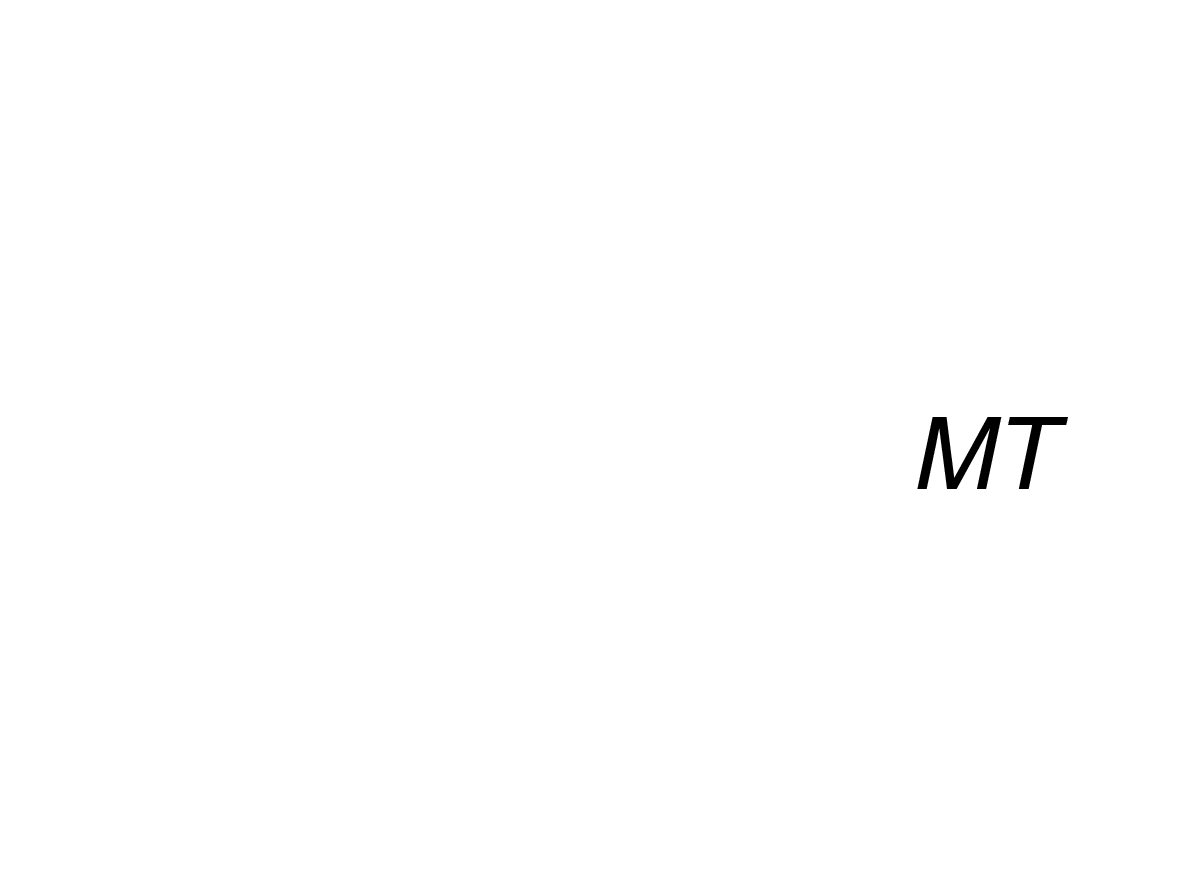
<style>
.page{position:relative;width:1183px;height:880px;background:#ffffff}
.page>*{position:absolute;margin:0}
.t1{font:100px "Helvetica-Oblique";color:#000000}
</style>
<div class="page">
<p class="t1" style="left:917px;top:417px;width:151px;height:72px">MT</p>
</div>
